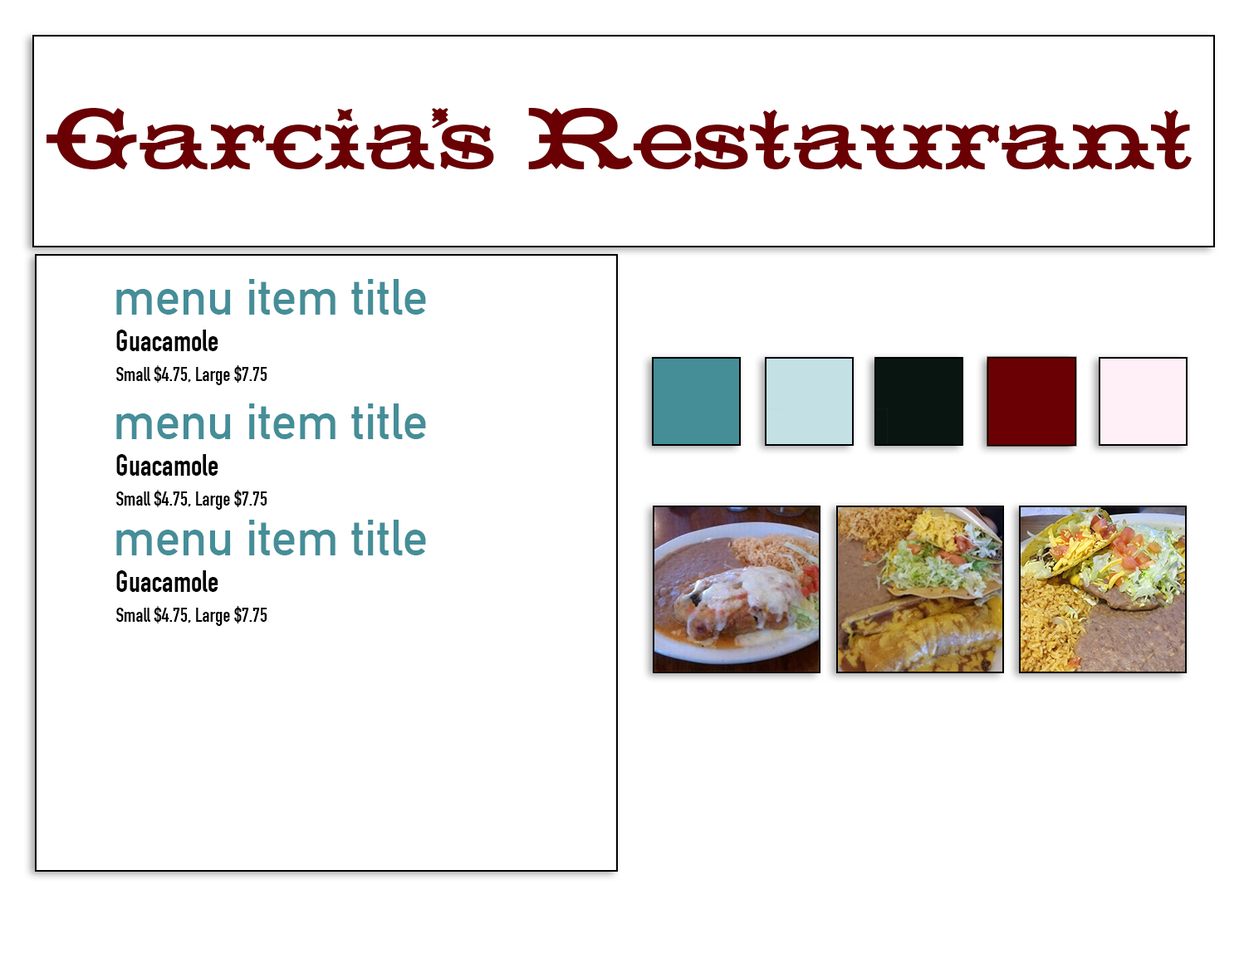
<style>
.page{position:relative;width:1244px;height:958px;background:#ffffff}
.page>*{position:absolute;margin:0}
.t1{font:86.4px "HWTTuscanExtended";color:#6a0003}
.t2{font:86.4px "HWTTuscanExtended";letter-spacing:-0.12em;color:#6a0003}
.t3{font:49.8px "DINAlternate-Bold";color:#458e98}
.t4{font:19.9px/29.9px "DINCondensed-Bold";color:#000000}
.t5{font:29.9px "DINCondensed-Bold";color:#000000}
</style>
<div class="page">
<p class="t1" style="left:47px;top:107px;width:1145px;height:63px">Garcia<span class="t2">’</span>s Restaurant</p>
<p class="t3" style="left:116px;top:279px;width:310px;height:36px">menu item title</p>
<p class="t4" style="left:116px;top:330px;width:151px;height:55px"><span class="t5">Guacamole<br></span>Small $4.75, Large $7.75</p>
<p class="t3" style="left:116px;top:404px;width:310px;height:35px">menu item title</p>
<p class="t4" style="left:116px;top:454px;width:151px;height:56px"><span class="t5">Guacamole<br></span>Small $4.75, Large $7.75</p>
<p class="t3" style="left:116px;top:520px;width:310px;height:36px">menu item title</p>
<p class="t4" style="left:116px;top:571px;width:151px;height:55px"><span class="t5">Guacamole<br></span>Small $4.75, Large $7.75</p>
</div>
